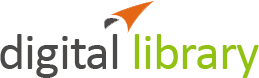
<style>
.page{position:relative;width:259px;height:78px;background:#ffffff}
.page>*{position:absolute;margin:0}
.t1{font:52px "Calibri";letter-spacing:-0.02em;color:#4b4a48}
.t2{font:52px "Calibri";letter-spacing:-0.02em;color:#91c113}
</style>
<div class="page">
<p class="t1" style="left:0px;top:34px;width:259px;height:44px">digital <span class="t2">library</span></p>
</div>
